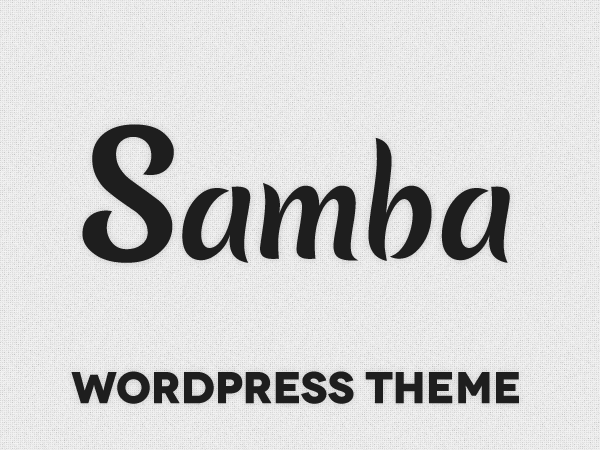
<style>
.page{position:relative;width:600px;height:450px}
.page>*{position:absolute;margin:0}
.t1{font:125.9px "MeriendaOne-Regular";letter-spacing:-0.05em;color:#1e1e1e}
.t2{font:165px "MeriendaOne-Regular";letter-spacing:-0.025em;color:#1e1e1e}
.t3{font:125.9px "MeriendaOne-Regular";letter-spacing:-0.01em;color:#1e1e1e}
.t4{font:44px "Novecentowide-Bold";letter-spacing:-0.026em;color:#1e1e1e;font-weight:bold}
</style>
<div class="page">
<p class="t1" style="left:82px;top:124px;width:428px;height:139px"><span class="t2">S</span>am<span class="t3">ba</span></p>
<p class="t4" style="left:71px;top:371px;width:448px;height:33px">WORDPRESS Theme</p>
</div>
